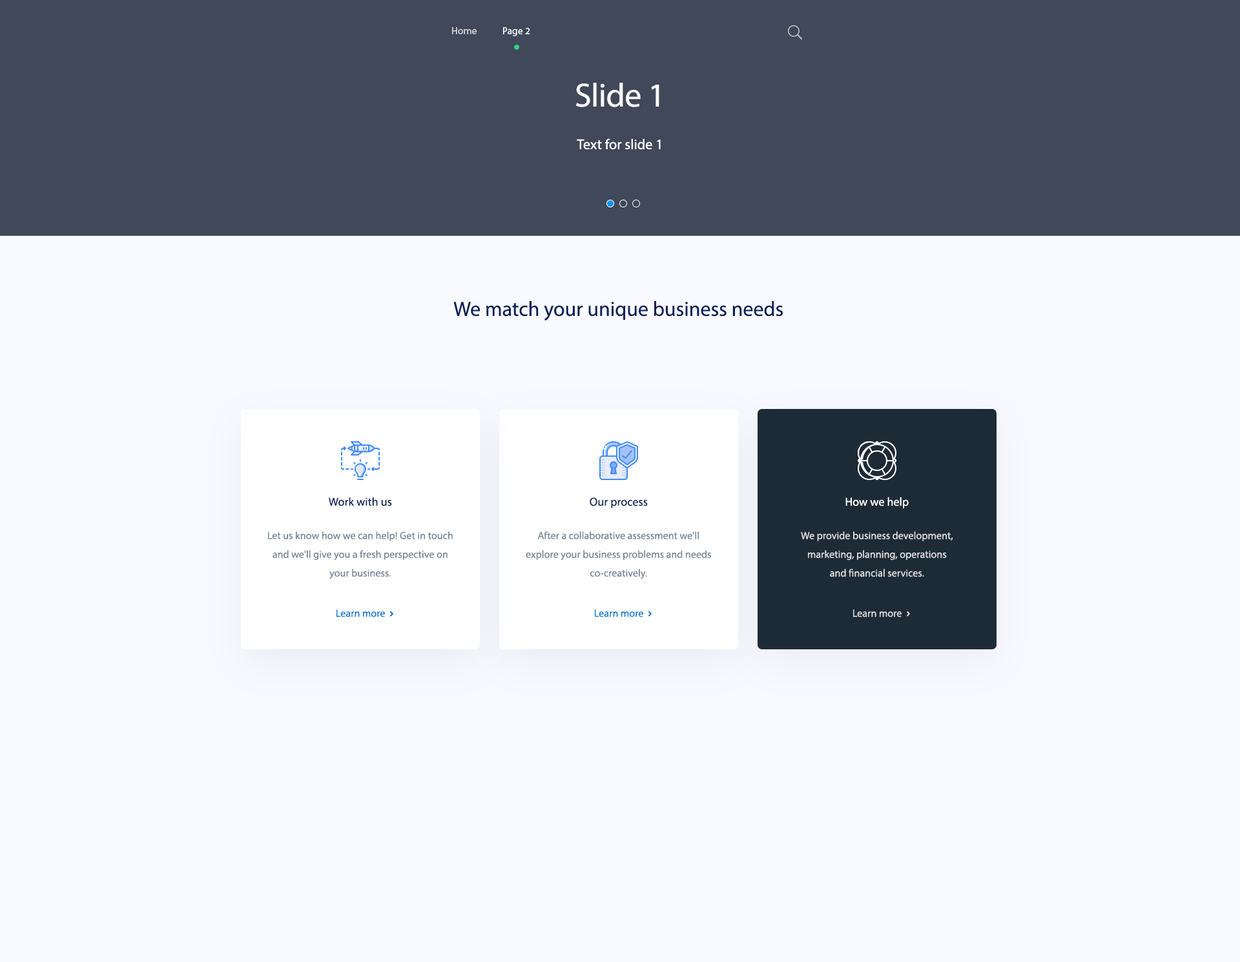
<style>
.page{position:relative;width:1240px;height:962px;background:#f8faff}
.page>*{position:absolute;margin:0}
.t1{font:9.7px "MyriadPro-Regular";letter-spacing:0.025em;color:#ffffff}
.t2{font:9.7px "MyriadPro-Regular";letter-spacing:0.025em;color:#dcdcdc}
.t3{font:33.6px "MyriadPro-Regular";letter-spacing:-0.01em;color:#ffffff}
.t4{font:14.2px "MyriadPro-Regular";letter-spacing:0.005em;color:#ffffff}
.t5{font:20.7px "MyriadPro-Regular";color:#071e57}
.t6{font:11.6px "MyriadPro-Regular";letter-spacing:0.005em;color:#071e57}
.t7{font:11.6px "MyriadPro-Regular";letter-spacing:0.005em;color:#ffffff}
.t8{font:10.3px/18.7px "MyriadPro-Regular";letter-spacing:0.005em;color:#748494}
.t9{font:10.3px/18.7px "MyriadPro-Regular";letter-spacing:0.005em;color:#dddddd}
.t10{font:10.3px "MyriadPro-Regular";letter-spacing:0.005em;color:#0077cc}
.t11{font:10.3px "MyriadPro-Regular";letter-spacing:0.005em;color:#dddddd}
</style>
<div class="page">
<p class="t1" style="left:452px;top:27px;width:78px;height:9px"><span class="t2">Home   </span>        Page 2</p>
<p class="t3" style="left:576px;top:83px;width:83px;height:24px">Slide 1</p>
<p class="t4" style="left:577px;top:138px;width:84px;height:12px">Text for slide 1</p>
<p class="t5" style="left:453px;top:301px;width:330px;height:19px">We match your unique business needs</p>
<p class="t6" style="left:329px;top:497px;width:63px;height:9px">Work with us</p>
<p class="t6" style="left:590px;top:497px;width:58px;height:11px">Our process</p>
<p class="t7" style="left:845px;top:497px;width:64px;height:11px">How we help</p>
<p class="t8" style="left:268px;top:531px;width:185px;height:48px;text-align:center">Let us know how we can help! Get in touch and we'll give you a fresh perspective on your business.</p>
<p class="t8" style="left:526px;top:531px;width:185px;height:48px;text-align:center">After a collaborative assessment we'll explore your business problems and needs co-creatively.</p>
<p class="t9" style="left:801px;top:531px;width:152px;height:46px;text-align:center">We provide business development, marketing, planning, operations<br>and financial services.</p>
<p class="t10" style="left:336px;top:609px;width:49px;height:8px">Learn more</p>
<p class="t10" style="left:595px;top:609px;width:48px;height:8px">Learn more</p>
<p class="t11" style="left:853px;top:609px;width:49px;height:8px">Learn more</p>
</div>
